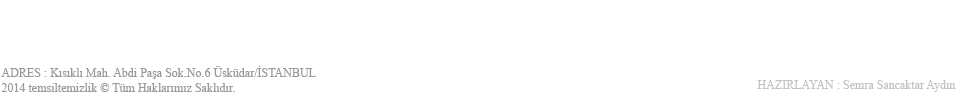
<style>
.page{position:relative;width:960px;height:100px;background:#ffffff}
.page>*{position:absolute;margin:0}
.t1{font:12px "TimesNewRomanPSMT";color:#999999}
.t2{font:12px "TimesNewRomanPSMT";color:#c2c2c2}
</style>
<div class="page">
<p class="t1" style="left:1px;top:66px;width:315px;height:13px">ADRES : Kısıklı Mah. Abdi Paşa Sok.No.6 Üsküdar/İSTANBUL</p>
<p class="t1" style="left:1px;top:83px;width:234px;height:9px">2014 temsiltemizlik ©  Tüm Haklarımız Saklıdır.</p>
<p class="t2" style="left:757px;top:80px;width:199px;height:12px">HAZIRLAYAN : Semra Sancaktar Aydın</p>
</div>
